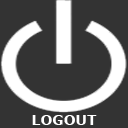
<style>
.page{position:relative;width:128px;height:128px;background:#333333}
.page>*{position:absolute;margin:0}
.t1{font:14px "Verdana-Bold";color:#ffffff}
</style>
<div class="page">
<p class="t1" style="left:32px;top:115px;width:65px;height:10px">LOGOUT</p>
</div>
